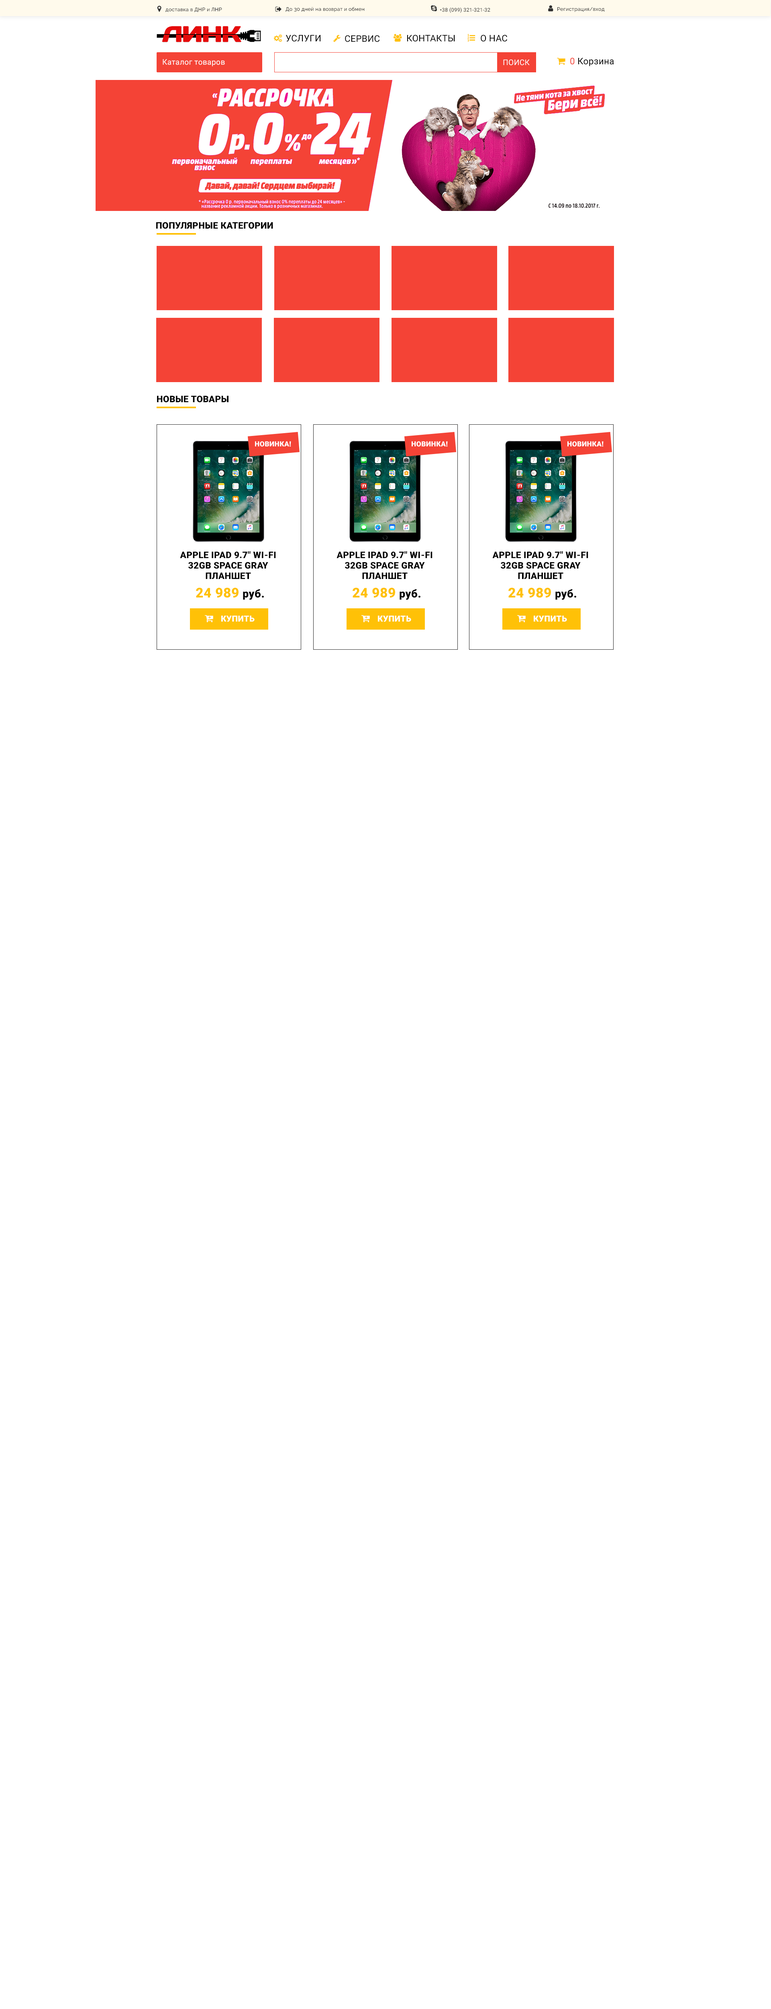
<style>
.page{position:relative;width:771px;height:2009px;background:#ffffff}
.page>*{position:absolute;margin:0}
.t1{font:5.1px "Raleway-Medium";letter-spacing:0.02em;color:#303030}
.t2{font:5.1px "Roboto-Regular";letter-spacing:0.02em;color:#303030}
.t3{font:9px "Roboto-Regular";letter-spacing:0.02em;color:#010101}
.t4{font:9px "Roboto-Regular";letter-spacing:0.02em;color:#000000}
.t5{font:7.7px "Roboto-Regular";letter-spacing:0.02em;color:#fefefe}
.t6{font:9px "Roboto-Regular";letter-spacing:0.02em;color:#f44336}
.t7{font:9px "Roboto-Black";letter-spacing:0.02em;color:#020202;text-transform:uppercase}
.t8{font:7.1px "Roboto-Black";letter-spacing:0.02em;color:#ffffff;text-transform:uppercase}
.t9{font:9px/10.5px "Roboto-Black";letter-spacing:0.02em;color:#020202;text-transform:uppercase}
.t10{font:13.5px "Roboto-Black";letter-spacing:0.02em;color:#ffc107;text-transform:uppercase}
.t11{font:10.9px "Roboto-Black";letter-spacing:0.02em;color:#020202}
.t12{font:8.4px "Roboto-Black";letter-spacing:0.02em;color:#ffffff;text-transform:uppercase}
</style>
<div class="page">
<p class="t1" style="left:166px;top:8px;width:56px;height:4px">доставка в ДНР и ЛНР</p>
<p class="t1" style="left:286px;top:7px;width:78px;height:5px">До 30 дней на возврат и обмен</p>
<p class="t2" style="left:440px;top:7px;width:51px;height:6px"><span class="t1">+</span>38 (099) 321-321-32</p>
<p class="t1" style="left:558px;top:7px;width:47px;height:5px">Регистрация/вход</p>
<p class="t3" style="left:286px;top:35px;width:35px;height:7px">УСЛУГИ</p>
<p class="t4" style="left:345px;top:35px;width:35px;height:7px">СЕРВИС</p>
<p class="t4" style="left:407px;top:35px;width:48px;height:7px">КОНТАКТЫ</p>
<p class="t4" style="left:481px;top:35px;width:26px;height:7px">О НАС</p>
<p class="t5" style="left:163px;top:59px;width:62px;height:7px">Каталог товаров</p>
<p class="t5" style="left:503px;top:59px;width:27px;height:6px">ПОИСК</p>
<p class="t3" style="left:571px;top:57px;width:43px;height:9px"><span class="t6">0</span> Корзина</p>
<p class="t7" style="left:156px;top:222px;width:117px;height:7px">Популярные категории</p>
<p class="t7" style="left:157px;top:395px;width:72px;height:8px">Новые товары</p>
<p class="t8" style="left:255px;top:441px;width:36px;height:6px">новинка!</p>
<p class="t8" style="left:412px;top:441px;width:36px;height:6px">новинка!</p>
<p class="t8" style="left:568px;top:441px;width:36px;height:6px">новинка!</p>
<p class="t9" style="left:180px;top:551px;width:96px;height:28px;text-align:center">Apple iPad 9.7" Wi-Fi 32GB Space Gray Планшет</p>
<p class="t9" style="left:337px;top:551px;width:96px;height:28px;text-align:center">Apple iPad 9.7" Wi-Fi 32GB Space Gray Планшет</p>
<p class="t9" style="left:493px;top:551px;width:96px;height:28px;text-align:center">Apple iPad 9.7" Wi-Fi 32GB Space Gray Планшет</p>
<p class="t10" style="left:196px;top:587px;width:68px;height:13px">24 989 <span class="t11">руб.</span></p>
<p class="t10" style="left:353px;top:587px;width:68px;height:13px">24 989 <span class="t11">руб.</span></p>
<p class="t10" style="left:509px;top:587px;width:68px;height:13px">24 989 <span class="t11">руб.</span></p>
<p class="t12" style="left:221px;top:616px;width:34px;height:6px">купить</p>
<p class="t12" style="left:378px;top:616px;width:33px;height:6px">купить</p>
<p class="t12" style="left:534px;top:616px;width:33px;height:6px">купить</p>
</div>
